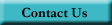
<style>
.page{position:relative;width:112px;height:25px;background:#3cb9c4}
.page>*{position:absolute;margin:0}
.t1{font:14px "Garamond-Bold";color:#000000}
</style>
<div class="page">
<p class="t1" style="left:22px;top:7px;width:65px;height:11px">Contact Us</p>
</div>
